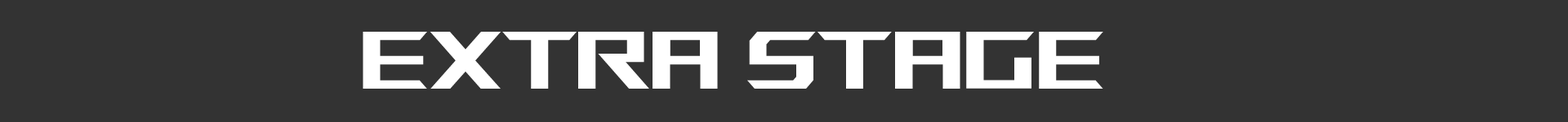
<style>
.page{position:relative;width:1568px;height:122px;background:#333333}
.page>*{position:absolute;margin:0}
.t1{font:81.7px "ROGFonts-Regular";color:#ffffff}
</style>
<div class="page">
<p class="t1" style="left:363px;top:32px;width:740px;height:57px">EXTRA STAGE</p>
</div>
